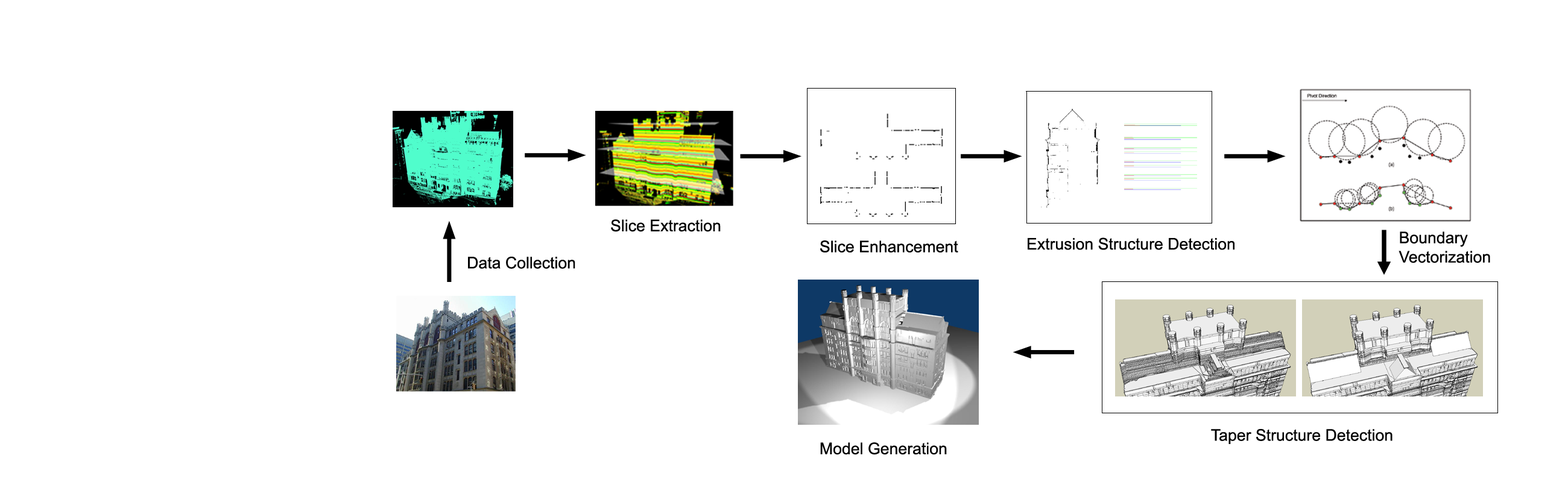
<style>
.page{position:relative;width:1568px;height:482px;background:#ffffff}
.page>*{position:absolute;margin:0}
.t1{font:16.1px "ArialMT";color:#000000}
</style>
<div class="page">
<p class="t1" style="left:611px;top:220px;width:110px;height:12px">Slice Extraction</p>
<p class="t1" style="left:1399px;top:232px;width:91px;height:32px">Boundary<br>Vectorization</p>
<p class="t1" style="left:820px;top:241px;width:138px;height:12px">Slice Enhancement</p>
<p class="t1" style="left:1028px;top:238px;width:206px;height:12px">Extrusion Structure Detection</p>
<p class="t1" style="left:468px;top:257px;width:107px;height:12px">Data Collection</p>
<p class="t1" style="left:1211px;top:429px;width:182px;height:15px">Taper Structure Detection</p>
<p class="t1" style="left:820px;top:443px;width:127px;height:12px">Model Generation</p>
</div>
